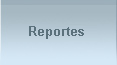
<style>
.page{position:relative;width:117px;height:65px}
.page>*{position:absolute;margin:0}
.t1{font:13px "Arial-BoldMT";color:#5b717c}
</style>
<div class="page">
<p class="t1" style="left:29px;top:26px;width:55px;height:13px">Reportes</p>
</div>
